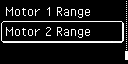
<style>
.page{position:relative;width:128px;height:64px;background:#000000}
.page>*{position:absolute;margin:0}
.t1{font:16px "PixelOperator";color:#ffffff}
</style>
<div class="page">
<p class="t1" style="left:5px;top:7px;width:85px;height:11px">Motor 1 Range</p>
<p class="t1" style="left:5px;top:27px;width:85px;height:11px">Motor 2 Range</p>
</div>
